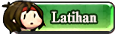
<style>
.page{position:relative;width:115px;height:34px}
.page>*{position:absolute;margin:0}
.t1{font:14px "RyuminPro-ExBold";letter-spacing:-0.04em;color:#fff4ee;font-weight:bold;scale:0.9 1}
</style>
<div class="page">
<p class="t1" style="left:51px;top:11px;width:46px;height:12px">Latihan</p>
</div>
